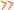
<style>
.page{position:relative;width:14px;height:10px;background:#ffffff}
.page>*{position:absolute;margin:0}
.t1{font:16px "ThrowMyHandsUpintheAir";color:#f3701a;text-transform:uppercase}
</style>
<div class="page">
<p class="t1" style="left:0px;top:0px;width:14px;height:10px">&gt;&gt;</p>
</div>
